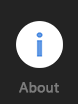
<style>
.page{position:relative;width:78px;height:104px;background:#232323}
.page>*{position:absolute;margin:0}
.t1{font:14px "SegoeUI";color:#7c7c7c;font-weight:bold}
</style>
<div class="page">
<p class="t1" style="left:19px;top:82px;width:40px;height:11px">About</p>
</div>
